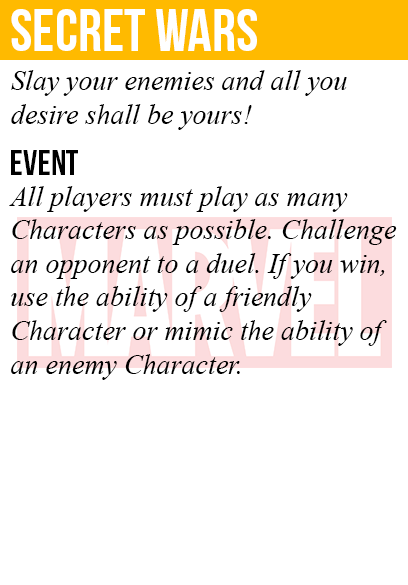
<style>
.page{position:relative;width:408px;height:585px;background:#ffffff}
.page>*{position:absolute;margin:0}
.t1{font:60px "BebasNeue";color:#ffffff}
.t2{font:28px "TimesNewRomanPS-ItalicMT";color:#000000}
.t3{font:36px "BebasNeue";color:#000000}
</style>
<div class="page">
<p class="t1" style="left:11px;top:9px;width:246px;height:42px">secret wars</p>
<p class="t2" style="left:11px;top:70px;width:336px;height:60px">Slay your enemies and all you<br>desire shall be yours!</p>
<p class="t3" style="left:11px;top:150px;width:67px;height:25px">event</p>
<p class="t2" style="left:9px;top:186px;width:388px;height:194px">All players must play as many<br>Characters as possible. Challenge<br>an opponent to a duel. If you win,<br>use the ability of a friendly<br>Character or mimic the ability of<br>an enemy Character.</p>
</div>
